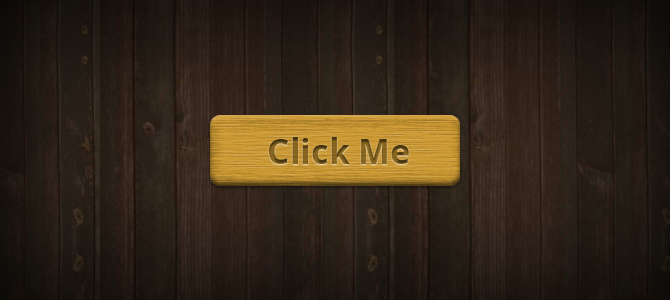
<style>
.page{position:relative;width:670px;height:300px}
.page>*{position:absolute;margin:0}
.t1{font:35px "DroidSans-Bold";color:#7f5f1c}
</style>
<div class="page">
<p class="t1" style="left:269px;top:137px;width:140px;height:27px">Click Me</p>
</div>
